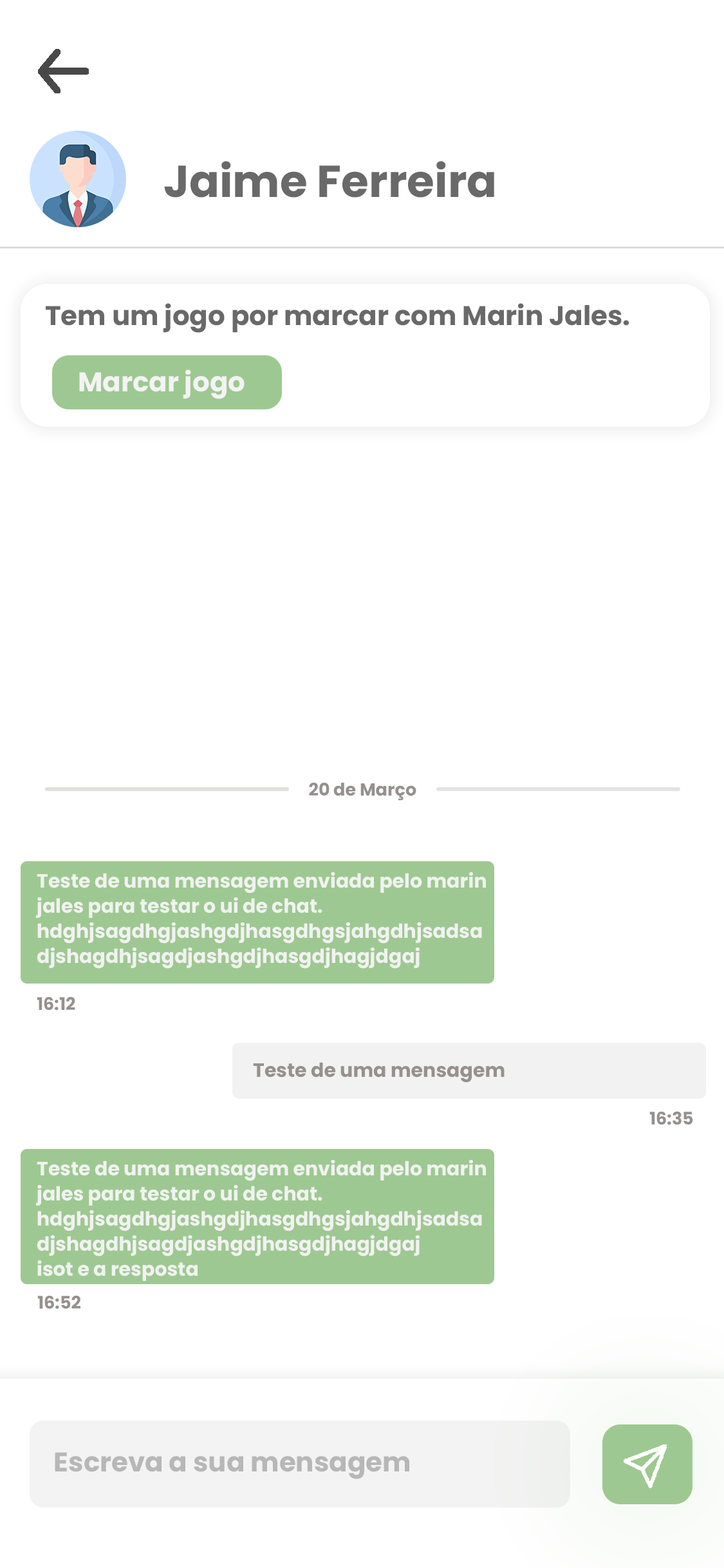
<style>
.page{position:relative;width:724px;height:1568px;background:#ffffff}
.page>*{position:absolute;margin:0}
.t1{font:44.6px "Poppins-Bold";color:#696969}
.t2{font:27px "Poppins-Bold";color:#696969}
.t3{font:27px "Poppins-Bold";color:#f3f3f3}
.t4{font:17.4px "Poppins-Bold";color:#979090}
.t5{font:19.3px/25.1px "Poppins-Bold";color:#f1f2f1}
.t6{font:19.3px "Poppins-Bold";color:#979090}
.t7{font:27px "Poppins-Bold";color:#b7b7b7}
</style>
<div class="page">
<p class="t1" style="left:164px;top:161px;width:330px;height:37px">Jaime Ferreira</p>
<p class="t2" style="left:46px;top:303px;width:584px;height:30px">Tem um jogo por marcar com Marin Jales.</p>
<p class="t3" style="left:79px;top:369px;width:166px;height:30px">Marcar jogo</p>
<p class="t4" style="left:309px;top:782px;width:107px;height:19px">20 de Março</p>
<p class="t5" style="left:36px;top:872px;width:450px;height:97px">Teste de uma mensagem enviada pelo marin<br>jales para testar o ui de chat.<br>hdghjsagdhgjashgdjhasgdhgsjahgdhjsadsa<br>djshagdhjsagdjashgdjhasgdjhagjdgaj</p>
<p class="t4" style="left:37px;top:996px;width:38px;height:15px">16:12</p>
<p class="t6" style="left:253px;top:1062px;width:252px;height:21px">Teste de uma mensagem</p>
<p class="t4" style="left:649px;top:1111px;width:44px;height:14px">16:35</p>
<p class="t5" style="left:36px;top:1160px;width:450px;height:121px">Teste de uma mensagem enviada pelo marin<br>jales para testar o ui de chat.<br>hdghjsagdhgjashgdjhasgdhgsjahgdhjsadsa<br>djshagdhjsagdjashgdjhasgdjhagjdgaj<br>isot e a resposta</p>
<p class="t4" style="left:37px;top:1295px;width:43px;height:14px">16:52</p>
<p class="t7" style="left:55px;top:1452px;width:354px;height:27px">Escreva a sua mensagem</p>
</div>
